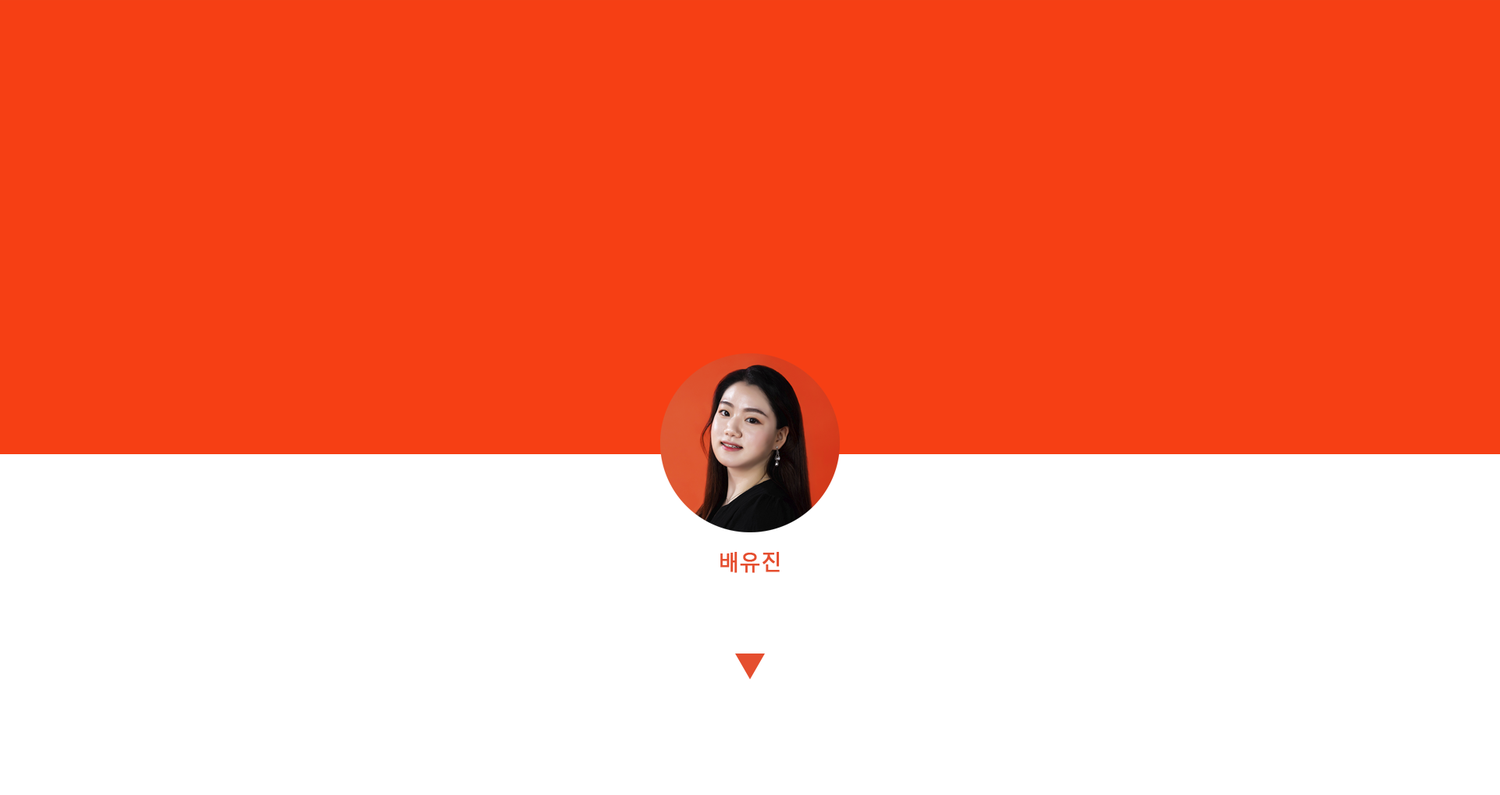
<style>
.page{position:relative;width:1500px;height:795px;background:#f63f14}
.page>*{position:absolute;margin:0}
.t1{font:20.8px "MalgunGothic";color:#e54e2f;font-weight:bold}
</style>
<div class="page">
<p class="t1" style="left:721px;top:552px;width:59px;height:21px">배유진</p>
</div>
